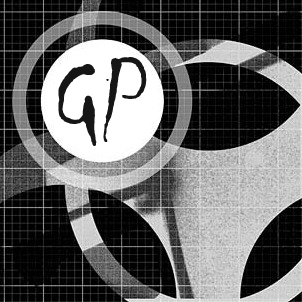
<style>
.page{position:relative;width:302px;height:302px}
.page>*{position:absolute;margin:0}
.t1{font:120px "Chiller-Regular";color:#161616}
</style>
<div class="page">
<p class="t1" style="left:58px;top:57px;width:89px;height:89px">GP</p>
</div>
